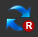
<style>
.page{position:relative;width:38px;height:37px;background:#333333}
.page>*{position:absolute;margin:0}
.t1{font:8.7px "Arial-BoldMT";color:#ffffff}
</style>
<div class="page">
<p class="t1" style="left:26px;top:22px;width:7px;height:7px">R</p>
</div>
